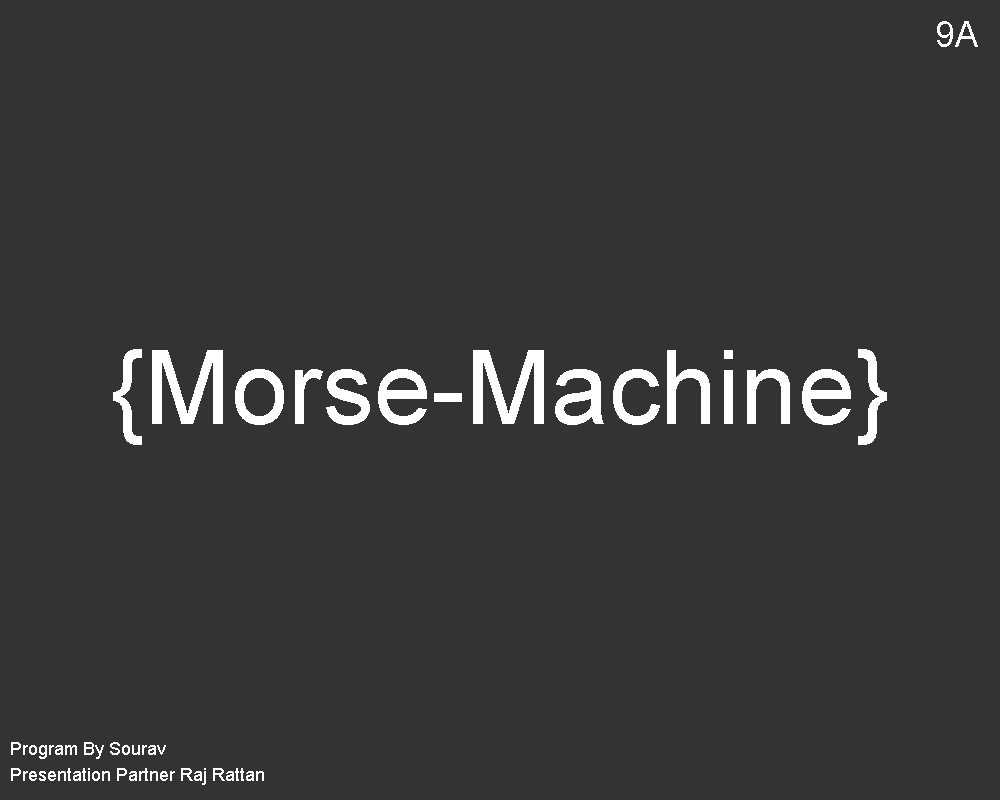
<style>
.page{position:relative;width:1000px;height:800px;background:#333333}
.page>*{position:absolute;margin:0}
.t1{font:36px "ArialMT";color:#ffffff}
.t2{font:103px "ArialMT";color:#ffffff}
.t3{font:18px "ArialMT";color:#ffffff}
</style>
<div class="page">
<p class="t1" style="left:937px;top:21px;width:41px;height:26px">9A</p>
<p class="t2" style="left:113px;top:349px;width:774px;height:96px">{Morse-Machine}</p>
<p class="t3" style="left:11px;top:742px;width:155px;height:17px">Program By Sourav</p>
<p class="t3" style="left:11px;top:768px;width:253px;height:17px">Presentation Partner Raj Rattan</p>
</div>
